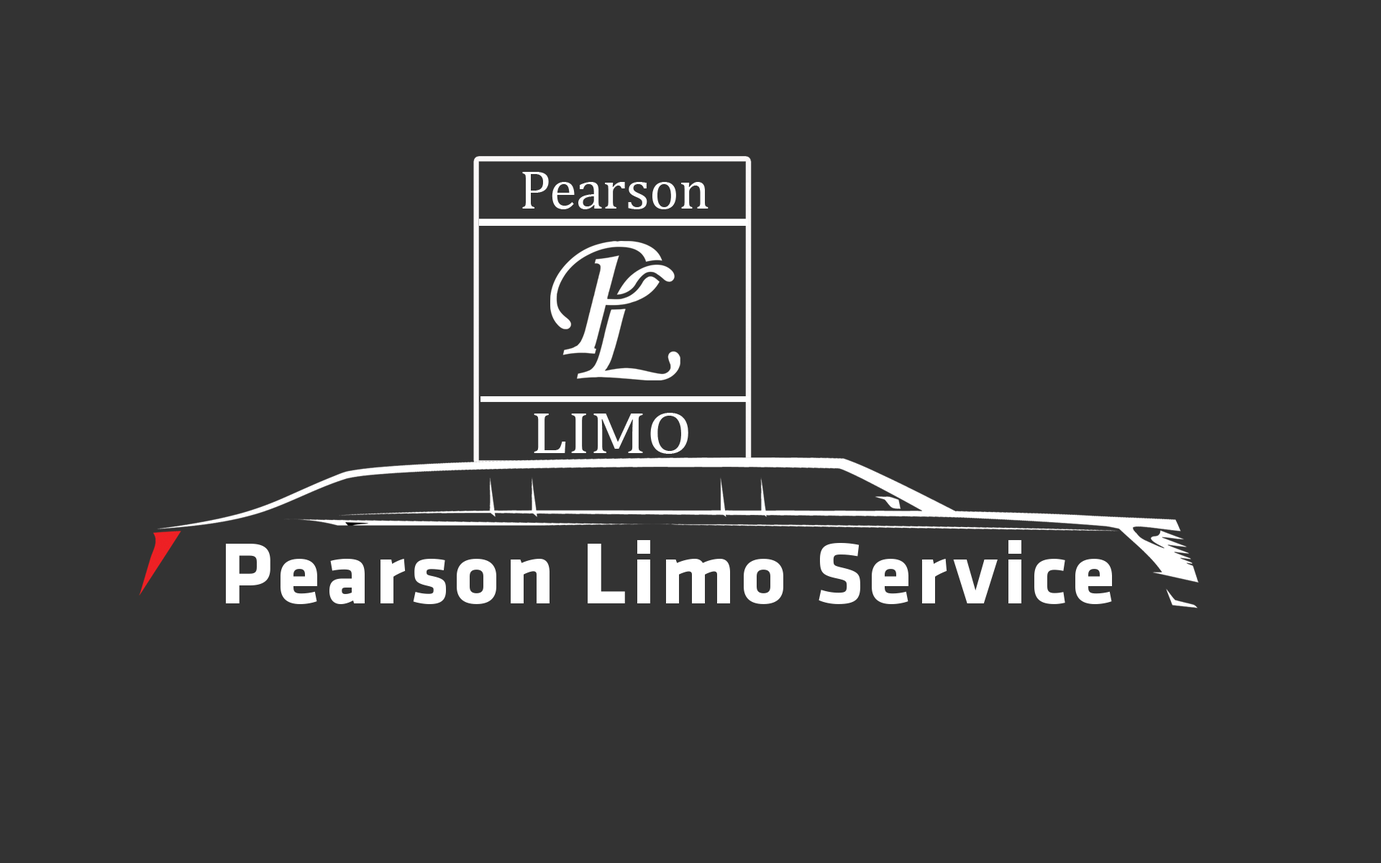
<style>
.page{position:relative;width:1381px;height:863px;background:#333333}
.page>*{position:absolute;margin:0}
.t1{font:55.1px "CambriaMath";color:#ffffff}
.t2{font:59.7px "CambriaMath";color:#ffffff;scale:1.17 1}
.t3{font:89.9px "Klavika-Bold";letter-spacing:0.05em;color:#ffffff}
</style>
<div class="page">
<p class="t1" style="left:522px;top:172px;width:187px;height:37px">Pearson</p>
<p class="t2" style="left:534px;top:413px;width:154px;height:41px">LIMO</p>
<p class="t3" style="left:226px;top:540px;width:886px;height:64px">Pearson Limo Service</p>
</div>
